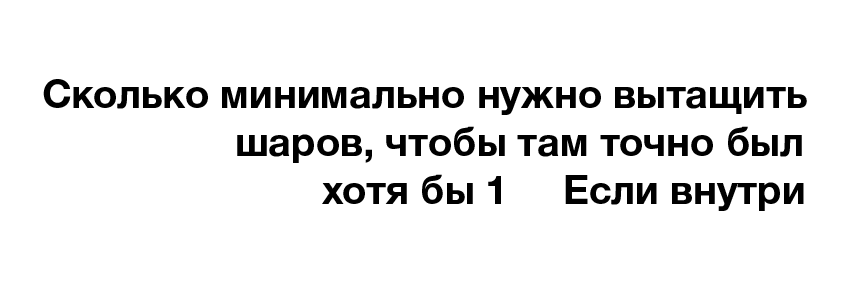
<style>
.page{position:relative;width:850px;height:283px;background:#ffffff}
.page>*{position:absolute;margin:0}
.t1{font:40px "HelveticaNeueCyr-Bold";color:#000000}
</style>
<div class="page">
<p class="t1" style="left:43px;top:79px;width:764px;height:132px;text-align:center">Сколько минимально нужно вытащить<br>                 шаров, чтобы там точно был<br>                         хотя бы 1     Если внутри</p>
</div>
